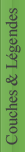
<style>
.page{position:relative;width:25px;height:152px}
.page>*{position:absolute;margin:0}
.t1{font:16px "TimesNewRomanPSMT";color:#404040}
</style>
<div class="page">
<p class="t1" style="left:5px;top:8px;width:16px;height:137px;rotate:-90deg">Couches &amp; Légendes</p>
</div>
